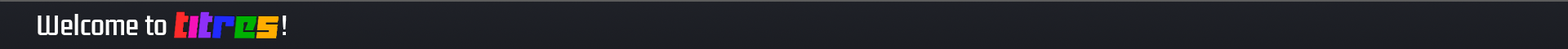
<style>
.page{position:relative;width:1568px;height:49px}
.page>*{position:absolute;margin:0}
.t1{font:24.5px "KdamThmorPro-Regular";color:#ffffff}
</style>
<div class="page">
<p class="t1" style="left:38px;top:14px;width:129px;height:21px">Welcome to</p>
<p class="t1" style="left:283px;top:16px;width:4px;height:19px">!</p>
</div>
